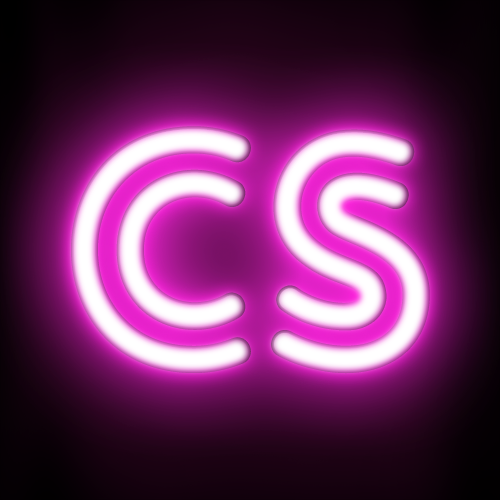
<style>
.page{position:relative;width:500px;height:500px}
.page>*{position:absolute;margin:0}
.t1{font:319.2px "LoveloLineBold";color:#ffffff}
</style>
<div class="page">
<p class="t1" style="left:74px;top:129px;width:353px;height:242px;opacity:0.78">CS</p>
</div>
